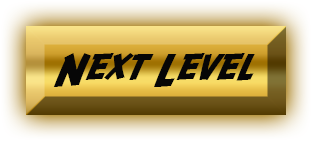
<style>
.page{position:relative;width:314px;height:143px}
.page>*{position:absolute;margin:0}
.t1{font:36.9px "SFFedora";letter-spacing:-0.005em;color:#060606;scale:1.05 1}
</style>
<div class="page">
<p class="t1" style="left:53px;top:53px;width:202px;height:34px">Next Level</p>
</div>
